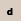
<style>
.page{position:relative;width:21px;height:21px;background:#d9cdc1}
.page>*{position:absolute;margin:0}
.t1{font:9px "Tahoma-Bold";color:#000000}
</style>
<div class="page">
<p class="t1" style="left:7px;top:8px;width:6px;height:7px">d</p>
</div>
